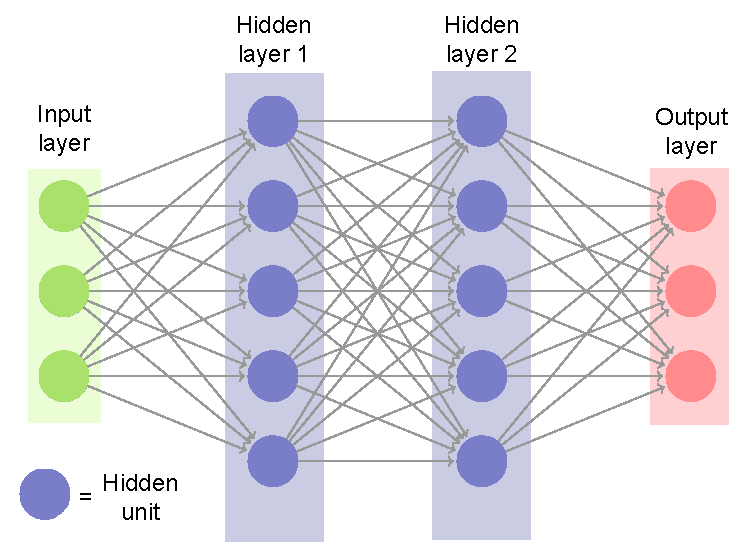
<style>
.page{position:relative;width:756px;height:557px;background:#ffffff}
.page>*{position:absolute;margin:0}
.t1{font:24px "ArialMT";color:#000000}
</style>
<div class="page">
<p class="t1" style="left:238px;top:16px;width:72px;height:51px;text-align:center">Hidden<br>layer 1</p>
<p class="t1" style="left:446px;top:16px;width:72px;height:51px;text-align:center">Hidden<br>layer 2</p>
<p class="t1" style="left:39px;top:105px;width:52px;height:51px;text-align:center">Input<br>layer</p>
<p class="t1" style="left:656px;top:108px;width:72px;height:51px;text-align:center">Output<br>layer</p>
<p class="t1" style="left:104px;top:474px;width:73px;height:46px;text-align:center">Hidden<br>unit</p>
<p class="t1" style="left:80px;top:493px;width:11px;height:7px">=</p>
</div>
